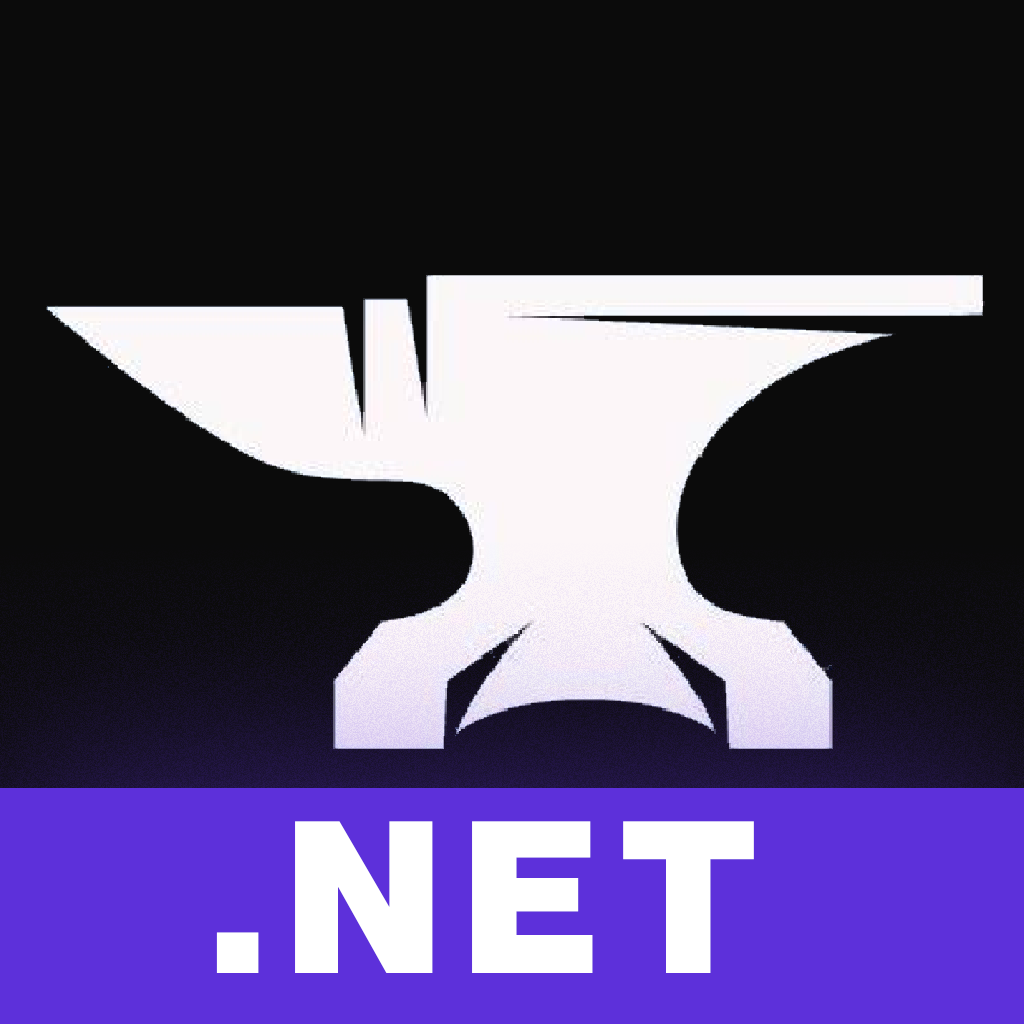
<style>
.page{position:relative;width:1024px;height:1024px;background:#0b0b0b}
.page>*{position:absolute;margin:0}
.t1{font:212.5px "NeueHaasDisplay-Black";letter-spacing:0.1em;color:#ffffff;text-transform:uppercase}
</style>
<div class="page">
<p class="t1" style="left:216px;top:821px;width:538px;height:152px">.NET</p>
</div>
